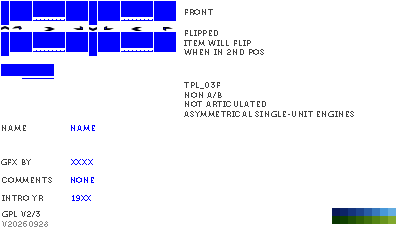
<style>
.page{position:relative;width:400px;height:230px;background:#ffffff}
.page>*{position:absolute;margin:0}
.t1{font:8px "Museo700-Regular";letter-spacing:0.075em;color:#404040;text-transform:uppercase}
.t2{font:8px "Museo700-Regular";letter-spacing:0.075em;color:#0000ff;text-transform:uppercase}
.t3{font:8px "Museo700-Regular";letter-spacing:0.075em;color:#848484;text-transform:uppercase}
</style>
<div class="page">
<p class="t1" style="left:185px;top:9px;width:28px;height:6px">FRONT</p>
<p class="t1" style="left:184px;top:30px;width:80px;height:25px">flipped<br>item will flip <br>when in 2nd pos</p>
<p class="t1" style="left:184px;top:82px;width:170px;height:35px">tpl_03f<br>NON A/B<br>not ARTICULATED<br>asymmetrical single-unit engines</p>
<p class="t1" style="left:2px;top:125px;width:24px;height:6px">name</p>
<p class="t2" style="left:71px;top:125px;width:24px;height:6px">name</p>
<p class="t1" style="left:1px;top:159px;width:30px;height:6px">gfx by</p>
<p class="t2" style="left:71px;top:159px;width:22px;height:6px">xxxx</p>
<p class="t1" style="left:2px;top:177px;width:50px;height:6px">comments</p>
<p class="t2" style="left:71px;top:177px;width:23px;height:6px">none</p>
<p class="t1" style="left:2px;top:195px;width:41px;height:6px">intro yr</p>
<p class="t2" style="left:72px;top:195px;width:19px;height:6px">19xx</p>
<p class="t1" style="left:2px;top:211px;width:38px;height:6px">gpl v2/3</p>
<p class="t3" style="left:2px;top:221px;width:46px;height:6px">v20260928</p>
</div>
